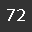
<style>
.page{position:relative;width:32px;height:32px;background:#333333}
.page>*{position:absolute;margin:0}
.t1{font:17.8px "MyriadPro-Regular";color:#ffffff;scale:1.12 1}
</style>
<div class="page">
<p class="t1" style="left:7px;top:9px;width:18px;height:12px">72</p>
</div>
